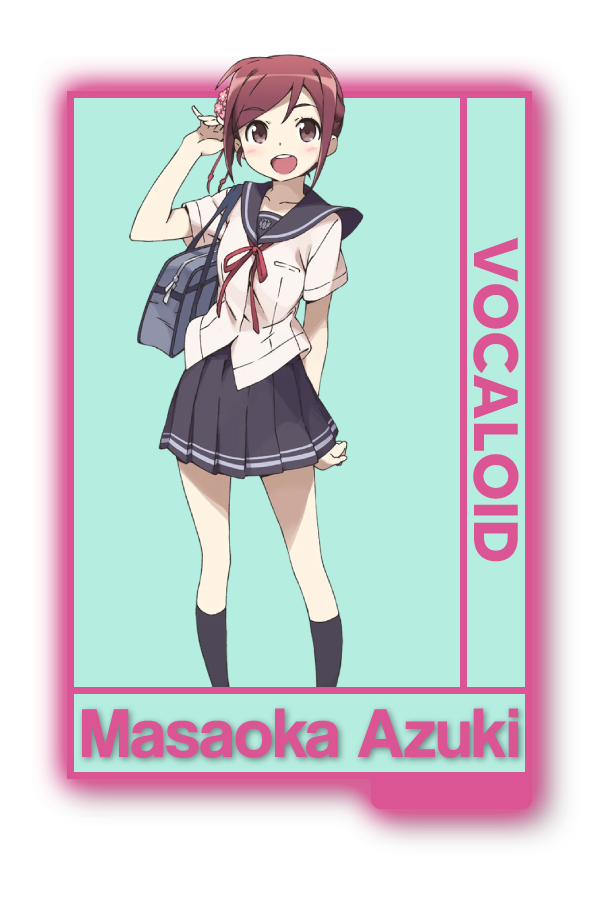
<style>
.page{position:relative;width:600px;height:900px;background:#b5ede1}
.page>*{position:absolute;margin:0}
.t1{font:62.5px "MADETOMMY-Bold";color:#db5493}
.t2{font:72px "CoolveticaRg-Regular";color:#db5493}
</style>
<div class="page">
<p class="t1" style="left:473px;top:237px;width:46px;height:325px;rotate:90deg">VOCALOID</p>
<p class="t2" style="left:82px;top:708px;width:437px;height:50px">Masaoka Azuki</p>
</div>
